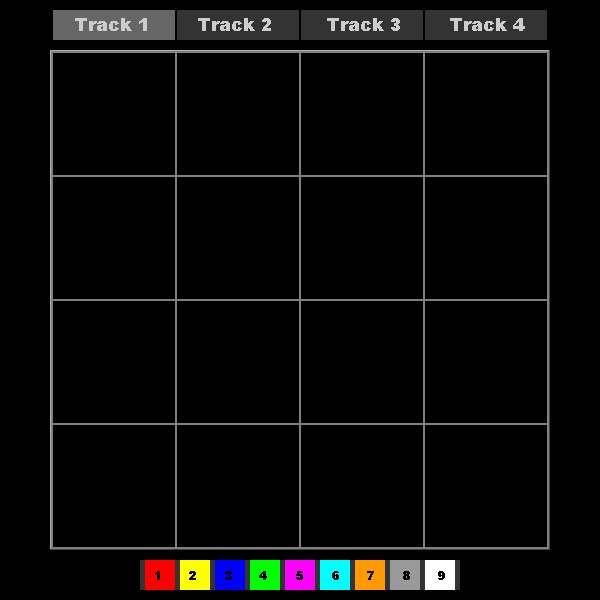
<style>
.page{position:relative;width:600px;height:600px;background:#000000}
.page>*{position:absolute;margin:0}
.t1{font:18px "Arial-Black";color:#cccccc}
.t2{font:12px "Arial-Black";letter-spacing:0.98em;color:#000000}
</style>
<div class="page">
<p class="t1" style="left:75px;top:18px;width:450px;height:13px">Track 1        Track 2         Track 3        Track 4</p>
<p class="t2" style="left:155px;top:571px;width:290px;height:9px">1 2 3 4 5 6 7 8 9</p>
</div>
